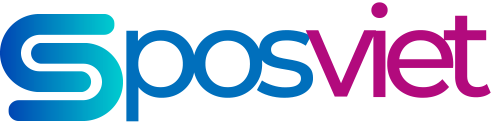
<style>
.page{position:relative;width:494px;height:137px;background:#ffffff}
.page>*{position:absolute;margin:0}
.t1{font:125px "MontserratRoman-Medium";letter-spacing:-0.08em;color:#b20a7d}
.t2{font:125px "MontserratRoman-Medium";letter-spacing:-0.08em;color:#006fbc}
</style>
<div class="page">
<p class="t1" style="left:126px;top:2px;width:365px;height:120px"><span class="t2">pos</span>viet</p>
</div>
